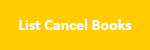
<style>
.page{position:relative;width:150px;height:50px;background:#ffcc00}
.page>*{position:absolute;margin:0}
.t1{font:16px "Calibri-Bold";color:#ffffff}
</style>
<div class="page">
<p class="t1" style="left:19px;top:19px;width:113px;height:11px">List Cancel Books</p>
</div>
